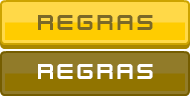
<style>
.page{position:relative;width:190px;height:98px;background:#ffd948}
.page>*{position:absolute;margin:0}
.t1{font:24px "KenVector-Future";color:#7b6927}
.t2{font:24px "KenVector-Future";color:#ffffff}
</style>
<div class="page">
<p class="t1" style="left:38px;top:15px;width:115px;height:15px">regras</p>
<p class="t2" style="left:38px;top:64px;width:115px;height:15px">regras</p>
</div>
